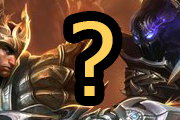
<style>
.page{position:relative;width:180px;height:120px}
.page>*{position:absolute;margin:0}
.t1{font:100px "Tahoma";color:#ffd057}
</style>
<div class="page">
<p class="t1" style="left:73px;top:21px;width:40px;height:75px">?</p>
</div>
